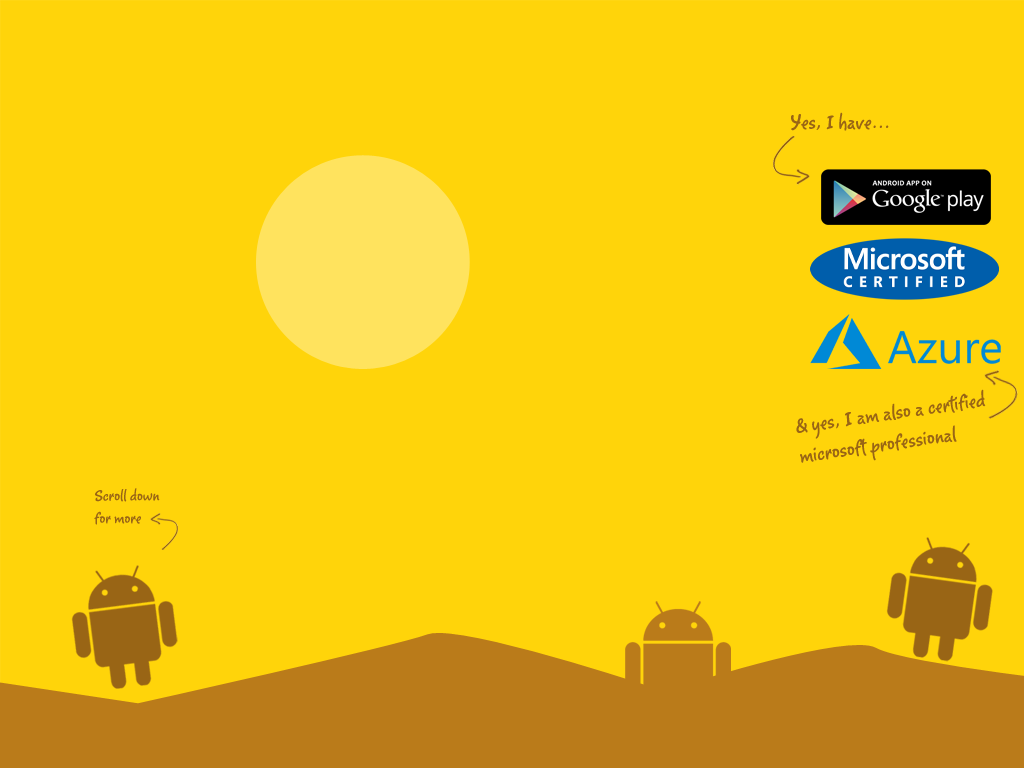
<style>
.page{position:relative;width:1024px;height:768px;background:#ffd40a}
.page>*{position:absolute;margin:0}
.t1{font:25px "Romy";color:#996515}
.t2{font:18.8px "Romy";color:#996515}
</style>
<div class="page">
<p class="t1" style="left:791px;top:112px;width:98px;height:19px">Yes, I have...</p>
<p class="t1" style="left:796px;top:389px;width:190px;height:74px;rotate:-8deg">&amp; yes, I am also a certified microsoft professional</p>
<p class="t2" style="left:94px;top:488px;width:66px;height:37px">Scroll down<br>for more</p>
</div>
